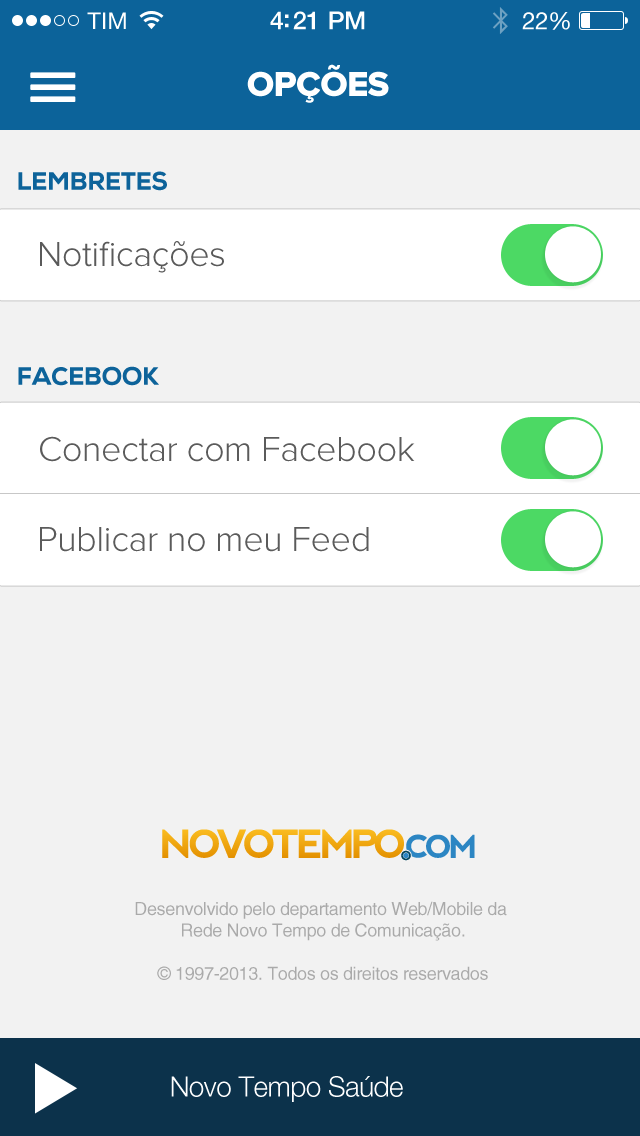
<style>
.page{position:relative;width:640px;height:1136px;background:#f2f2f2}
.page>*{position:absolute;margin:0}
.t1{font:36px "ProximaNova-Extrabld";letter-spacing:-0.02em;color:#ffffff;text-transform:uppercase}
.t2{font:25px "NexaHeavy";letter-spacing:-0.02em;color:#0d639a}
.t3{font:36px "ProximaNova-Light";letter-spacing:-0.01em;color:#5a5a5a}
.t4{font:36px "ProximaNova-Light";letter-spacing:-0.01em;color:#5b5b5b}
.t5{font:18px "HelveticaLTStd-Roman";letter-spacing:-0.02em;color:#aaaaaa}
.t6{font:28px "HelveticaNeueLTStd-Lt";letter-spacing:-0.02em;color:#ffffff}
</style>
<div class="page">
<p class="t1" style="left:247px;top:64px;width:142px;height:39px">OPÇÕES</p>
<p class="t2" style="left:18px;top:171px;width:149px;height:20px">LEMBRETES</p>
<p class="t3" style="left:40px;top:241px;width:184px;height:32px">Notificações</p>
<p class="t2" style="left:18px;top:366px;width:141px;height:20px">FACEBOOK</p>
<p class="t4" style="left:40px;top:436px;width:375px;height:26px">Conectar com Facebook</p>
<p class="t4" style="left:40px;top:527px;width:329px;height:25px">Publicar no meu Feed</p>
<p class="t5" style="left:135px;top:901px;width:372px;height:79px;text-align:center">Desenvolvido pelo departamento Web/Mobile da <br>Rede Novo Tempo de Comunicação.<br><br>© 1997-2013. Todos os direitos reservados</p>
<p class="t6" style="left:171px;top:1076px;width:232px;height:26px">Novo Tempo Saúde</p>
</div>
